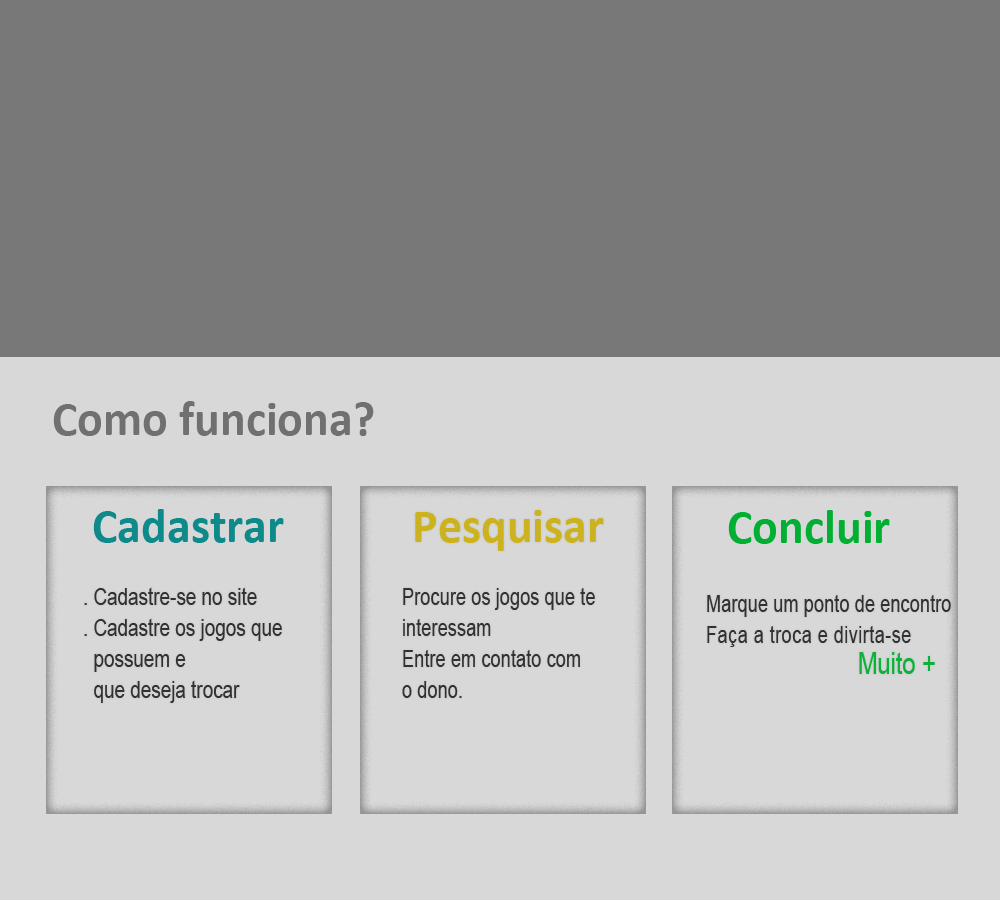
<style>
.page{position:relative;width:1000px;height:900px;background:#d8d8d8}
.page>*{position:absolute;margin:0}
.t1{font:48px "Calibri-Bold";color:#707070}
.t2{font:48px "Calibri-Bold";color:#0f8a8b}
.t3{font:48px "Calibri-Bold";color:#cdb21f}
.t4{font:48px "Calibri-Bold";color:#01af32}
.t5{font:24px/31.1px "ArialMT";color:#313131;scale:0.79 1}
.t6{font:23.3px/31.1px "ArialMT";color:#313131;scale:0.79 1}
.t7{font:23.3px/31.1px "ArialMT";letter-spacing:0.02em;color:#313131;scale:0.79 1}
.t8{font:30px/31.1px "ArialMT";color:#0bb139;scale:0.79 1}
</style>
<div class="page">
<p class="t1" style="left:53px;top:401px;width:321px;height:35px">Como funciona?</p>
<p class="t2" style="left:93px;top:509px;width:191px;height:34px">Cadastrar</p>
<p class="t3" style="left:415px;top:510px;width:189px;height:41px">Pesquisar</p>
<p class="t4" style="left:728px;top:510px;width:162px;height:34px">Concluir</p>
<p class="t5" style="left:84px;top:587px;width:198px;height:116px">. Cadastre-se no site <br>. Cadastre os jogos que<br>  possuem e <br>  que deseja trocar</p>
<p class="t6" style="left:402px;top:588px;width:193px;height:110px">Procure os jogos que te <br>interessam<br>Entre em contato com <br>o dono.</p>
<p class="t6" style="left:707px;top:595px;width:244px;height:79px">Marque um ponto de encontro<br><span class="t7">Faça a troca e divirta-se <br>     </span><span class="t8">Muito +</span></p>
</div>
